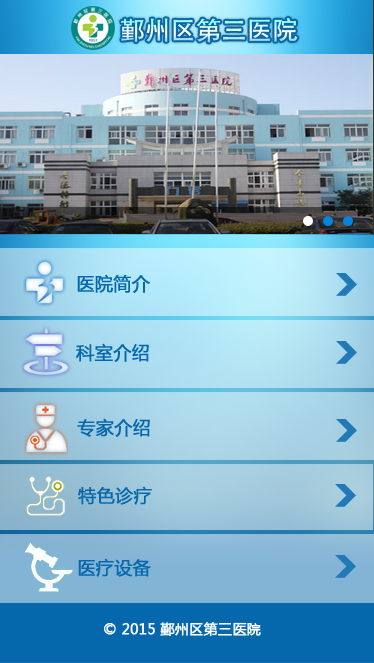
<style>
.page{position:relative;width:374px;height:663px}
.page>*{position:absolute;margin:0}
.t1{font:18px "MicrosoftYaHei";color:#0568ac;font-weight:bold}
.t2{font:14px "MicrosoftYaHei";color:#ffffff;font-weight:bold}
</style>
<div class="page">
<p class="t1" style="left:77px;top:274px;width:73px;height:19px">医院简介</p>
<p class="t1" style="left:76px;top:343px;width:73px;height:19px">科室介绍</p>
<p class="t1" style="left:77px;top:418px;width:73px;height:19px">专家介绍</p>
<p class="t1" style="left:78px;top:486px;width:74px;height:19px">特色诊疗</p>
<p class="t1" style="left:78px;top:558px;width:73px;height:19px">医疗设备</p>
<p class="t2" style="left:104px;top:622px;width:157px;height:15px">© 2015 鄞州区第三医院</p>
</div>
